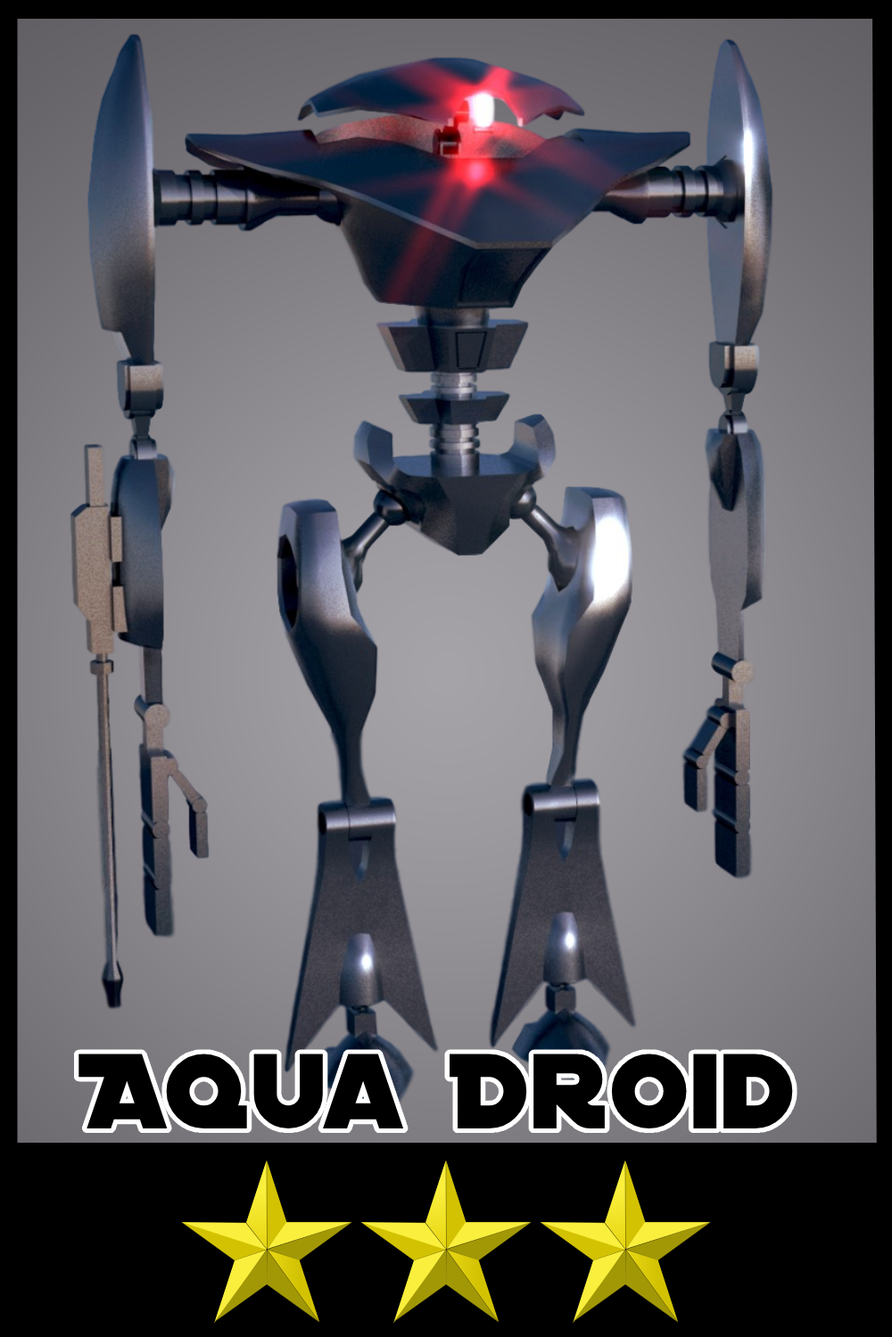
<style>
.page{position:relative;width:892px;height:1337px}
.page>*{position:absolute;margin:0}
.t1{font:114.7px "DistantGalaxy";letter-spacing:0.012em;color:#000000}
</style>
<div class="page">
<p class="t1" style="left:78px;top:1054px;width:715px;height:75px">Aqua Droid</p>
</div>
